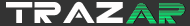
<style>
.page{position:relative;width:190px;height:26px;background:#333333}
.page>*{position:absolute;margin:0}
.t1{font:30px "XHARPDemoRegular";color:#fffdfd}
.t2{font:30px "XHARPDemoGradient";color:#04f179}
</style>
<div class="page">
<p class="t1" style="left:6px;top:1px;width:117px;height:22px">TRAZ</p>
<p class="t2" style="left:126px;top:3px;width:59px;height:21px">AR</p>
</div>
